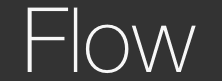
<style>
.page{position:relative;width:222px;height:81px;background:#333333}
.page>*{position:absolute;margin:0}
.t1{font:90.2px "HelveticaNeue-Thin";color:#f7f7f7}
</style>
<div class="page">
<p class="t1" style="left:27px;top:7px;width:169px;height:67px">Flow</p>
</div>
